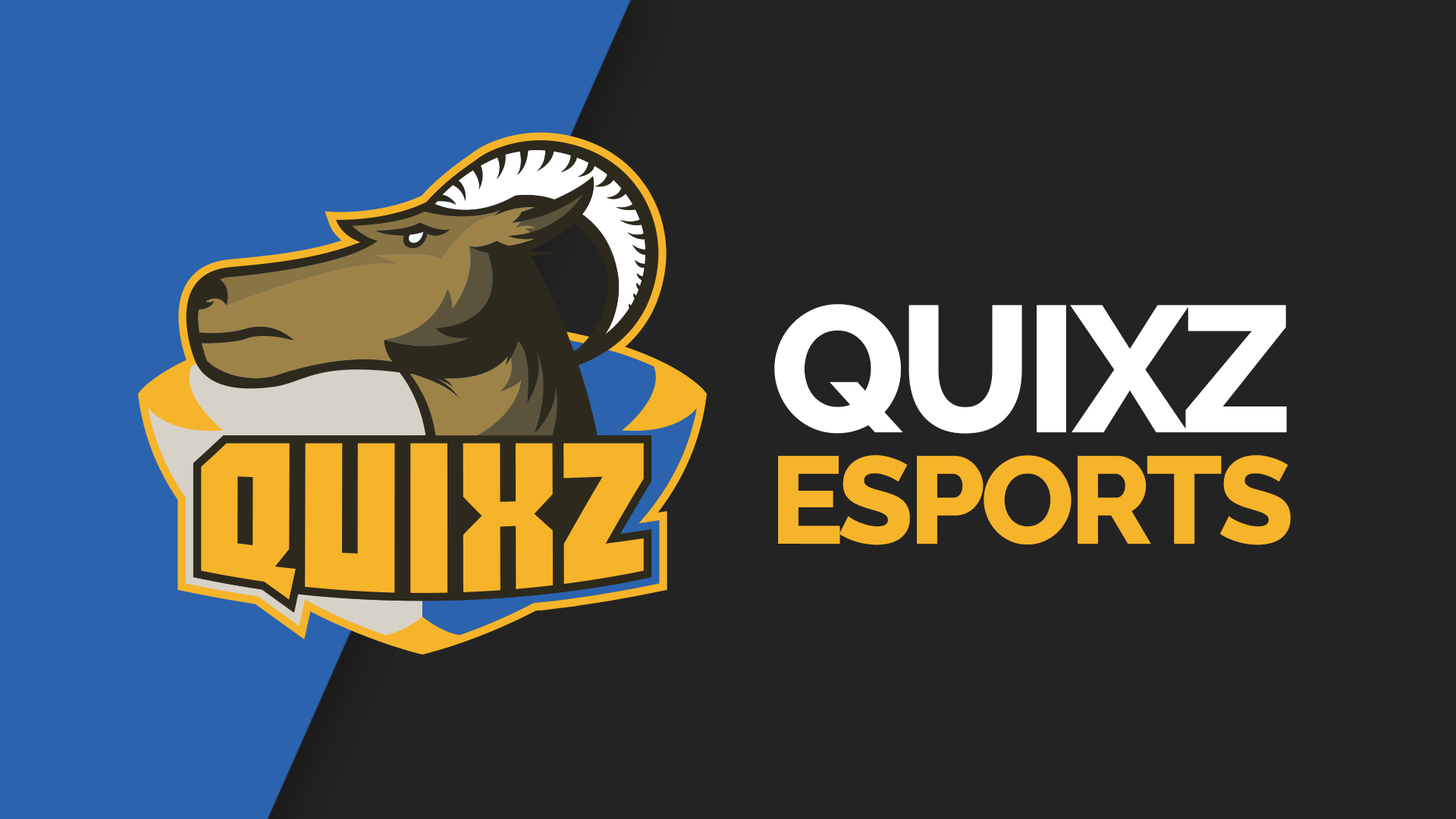
<style>
.page{position:relative;width:1456px;height:819px;background:#232323}
.page>*{position:absolute;margin:0}
.t1{font:178.9px "Raleway-ExtraBold";letter-spacing:-0.04em;color:#ffffff}
.t2{font:123.8px "Raleway-ExtraBold";letter-spacing:-0.04em;color:#f6b42a}
</style>
<div class="page">
<p class="t1" style="left:774px;top:304px;width:513px;height:130px">QUIXZ</p>
<p class="t2" style="left:778px;top:455px;width:513px;height:90px">ESPORTS</p>
</div>
